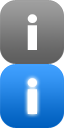
<style>
.page{position:relative;width:64px;height:128px}
.page>*{position:absolute;margin:0}
.t1{font:50.8px "Bauhaus93";color:#ffffff}
</style>
<div class="page">
<p class="t1" style="left:27px;top:14px;width:10px;height:36px">i</p>
<p class="t1" style="left:27px;top:78px;width:10px;height:36px">i</p>
</div>
